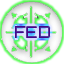
<style>
.page{position:relative;width:64px;height:64px}
.page>*{position:absolute;margin:0}
.t1{font:16px "Orbitron-Medium";color:#45068b}
</style>
<div class="page">
<p class="t1" style="left:15px;top:26px;width:35px;height:12px">FED</p>
</div>
